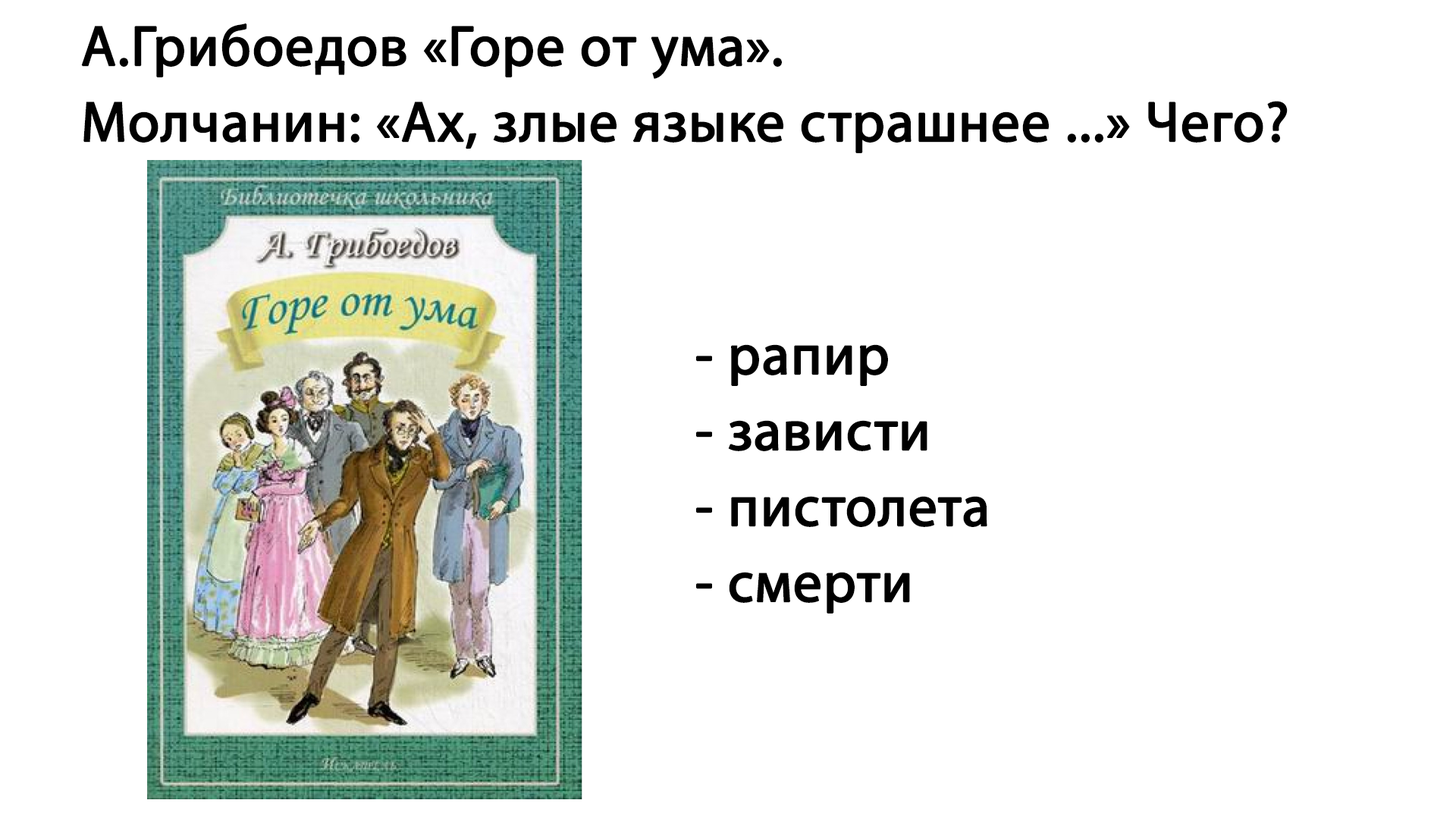
<style>
.page{position:relative;width:1456px;height:819px;background:#ffffff}
.page>*{position:absolute;margin:0}
.t1{font:56.9px/75.8px "MyriadPro-Regular";color:#000000;font-weight:bold}
</style>
<div class="page">
<p class="t1" style="left:81px;top:23px;width:1207px;height:130px">А.Грибоедов «Горе от ума». <br>Молчанин: «Ах, злые языке страшнее ...» Чего?</p>
<p class="t1" style="left:696px;top:344px;width:291px;height:269px">- рапир<br>- зависти<br>- пистолета<br>- смерти</p>
</div>
